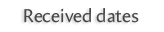
<style>
.page{position:relative;width:164px;height:32px;background:#ffffff}
.page>*{position:absolute;margin:0}
.t1{font:18.7px "Amira-Roman";color:#474747}
</style>
<div class="page">
<p class="t1" style="left:24px;top:8px;width:115px;height:15px">Received dates</p>
</div>
